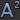
<style>
.page{position:relative;width:20px;height:20px;background:#333333}
.page>*{position:absolute;margin:0}
.t1{font:19px "LucidaGrande";letter-spacing:-0.025em;color:#8293be}
.t2{font:9px "LucidaGrande";letter-spacing:-0.025em}
</style>
<div class="page">
<p class="t1" style="left:0px;top:3px;width:14px;height:14px">A</p>
<p class="t2" style="left:14px;top:1px;width:5px;height:7px">2</p>
</div>
